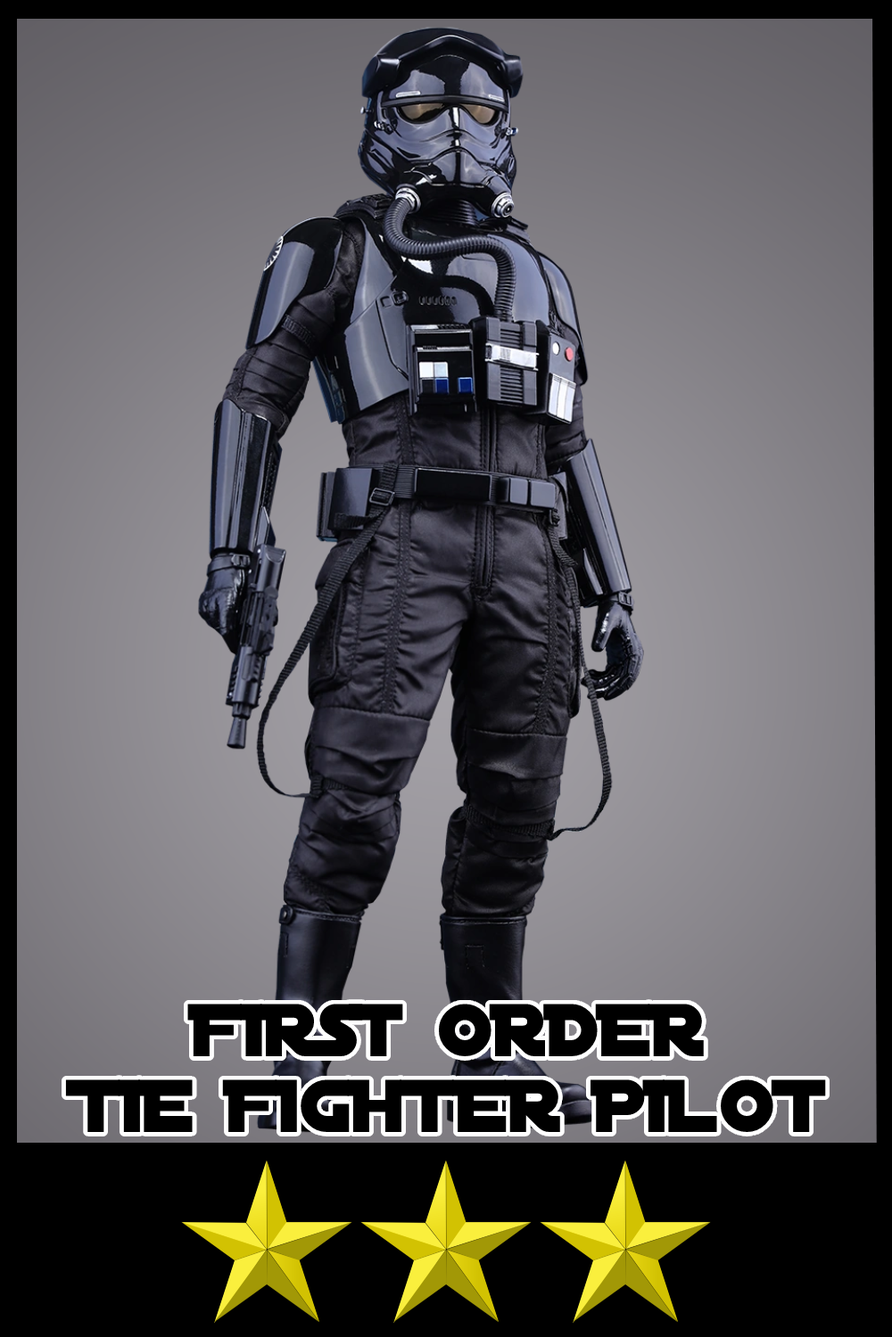
<style>
.page{position:relative;width:892px;height:1337px}
.page>*{position:absolute;margin:0}
.t1{font:80.4px/76px "DistantGalaxy";color:#000000}
</style>
<div class="page">
<p class="t1" style="left:65px;top:1004px;width:761px;height:128px;text-align:center">FIRST ORDER<br>TIE FIGHTER PILOT</p>
</div>
